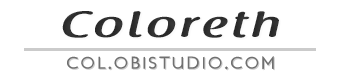
<style>
.page{position:relative;width:342px;height:77px;background:#ffffff}
.page>*{position:absolute;margin:0}
.t1{font:36.6px "RaspoutineDemiBold";letter-spacing:0.1em;color:#282828;scale:1.38 1}
.t2{font:17.5px "LondonBetween";letter-spacing:0.1em;color:#595959;text-transform:uppercase}
</style>
<div class="page">
<p class="t1" style="left:62px;top:11px;width:217px;height:27px;opacity:0.87">Coloreth</p>
<p class="t2" style="left:67px;top:56px;width:207px;height:14px;opacity:0.86">COL.obistudio.com</p>
</div>
